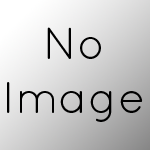
<style>
.page{position:relative;width:150px;height:150px}
.page>*{position:absolute;margin:0}
.t1{font:45px "QuicksandBook-Regular";color:#000000}
</style>
<div class="page">
<p class="t1" style="left:7px;top:27px;width:136px;height:95px;text-align:center">No<br>Image</p>
</div>
